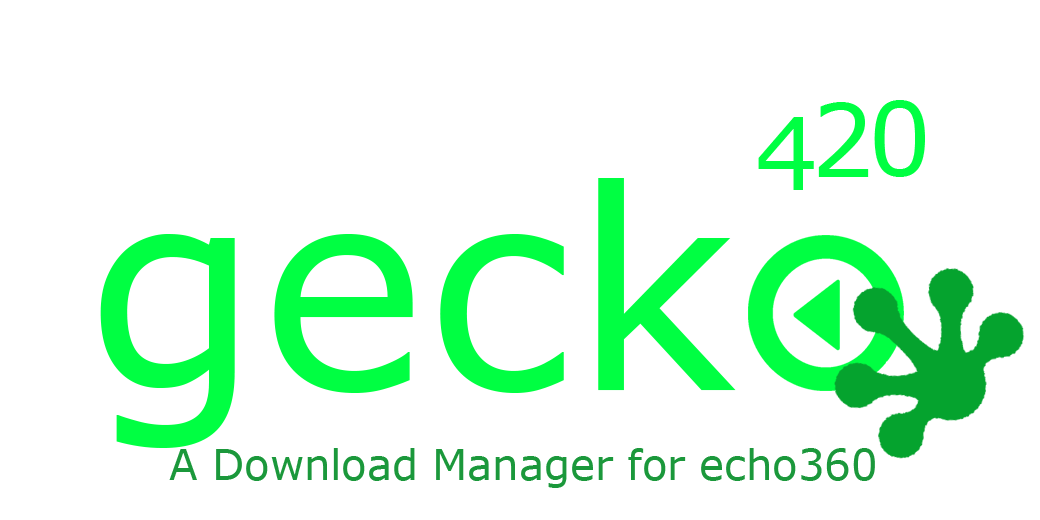
<style>
.page{position:relative;width:1040px;height:520px;background:#ffffff}
.page>*{position:absolute;margin:0}
.t1{font:100px "MSReferenceSansSerif";color:#00ff42}
.t2{font:279.2px "MSReferenceSansSerif";color:#00ff42}
.t3{font:41.7px "MSReferenceSansSerif";color:#1b983b}
</style>
<div class="page">
<p class="t1" style="left:818px;top:102px;width:51px;height:75px">2</p>
<p class="t1" style="left:874px;top:100px;width:51px;height:77px">0</p>
<p class="t1" style="left:758px;top:117px;width:56px;height:73px">4</p>
<p class="t2" style="left:100px;top:178px;width:636px;height:270px">geck</p>
<p class="t3" style="left:169px;top:448px;width:706px;height:40px">A Download Manager for echo360</p>
</div>
